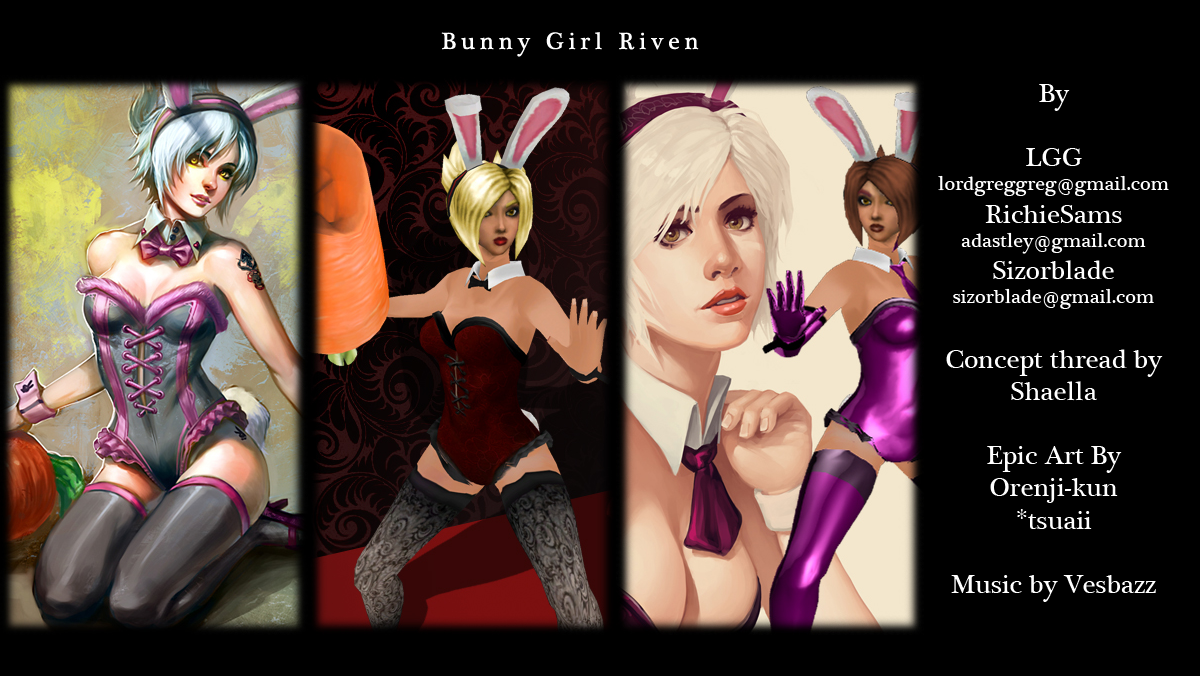
<style>
.page{position:relative;width:1200px;height:676px;background:#000000}
.page>*{position:absolute;margin:0}
.t1{font:24px "PlantagenetCherokee";letter-spacing:0.2em;color:#ffffff}
.t2{font:26.8px "PlantagenetCherokee";color:#ffffff}
.t3{font:20.1px "PlantagenetCherokee";color:#ffffff}
</style>
<div class="page">
<p class="t1" style="left:441px;top:32px;width:258px;height:25px">Bunny Girl Riven</p>
<p class="t2" style="left:938px;top:84px;width:231px;height:518px;text-align:center">By <br><br>LGG<br><span class="t3">lordgreggreg@gmail.com<br></span>RichieSams<br><span class="t3">adastley@gmail.com<br></span>Sizorblade<br><span class="t3">sizorblade@gmail.com<br></span><br>Concept thread by Shaella<br><br>Epic Art By<br>Orenji-kun<br>*tsuaii<br><br>Music by Vesbazz</p>
</div>
